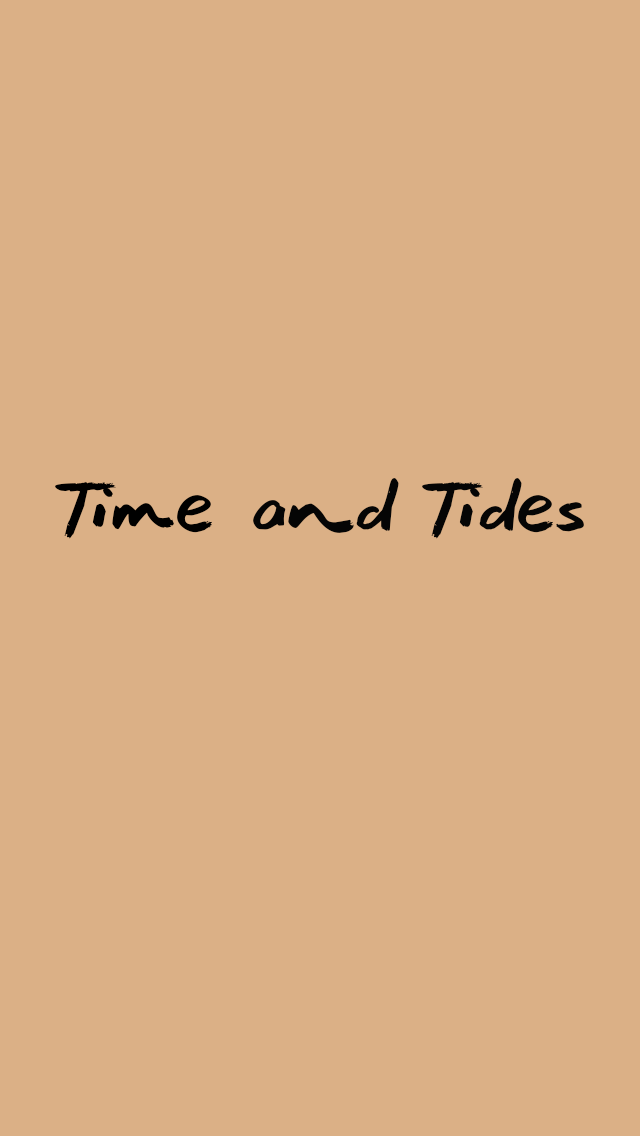
<style>
.page{position:relative;width:640px;height:1136px;background:#dbb086}
.page>*{position:absolute;margin:0}
.t1{font:150px "OceanCoastlines-Regular";color:#050505}
.t2{font:150px "OceanCoastlines-Regular";color:#000000}
</style>
<div class="page">
<p class="t1" style="left:55px;top:478px;width:529px;height:61px"><span class="t2">Time </span>and Tides</p>
</div>
